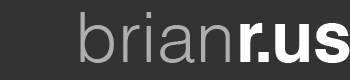
<style>
.page{position:relative;width:350px;height:80px;background:#333333}
.page>*{position:absolute;margin:0}
.t1{font:70.2px "Helvetica-Light";color:#aeaeae}
.t2{font:70.2px "Helvetica-Bold";color:#ffffff}
</style>
<div class="page">
<p class="t1" style="left:80px;top:12px;width:150px;height:51px">brian</p>
<p class="t2" style="left:240px;top:23px;width:110px;height:40px">r.us</p>
</div>
